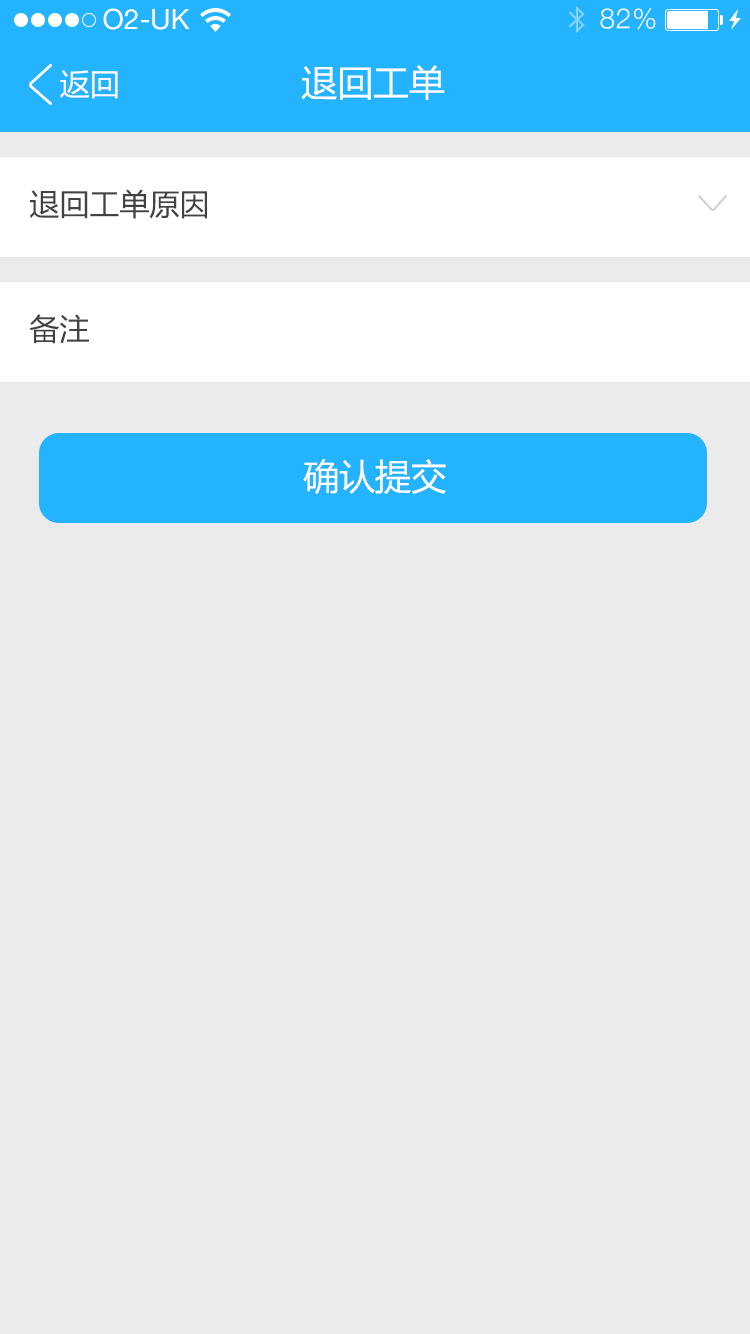
<style>
.page{position:relative;width:750px;height:1334px;background:#ebebeb}
.page>*{position:absolute;margin:0}
.t1{font:36px "MicrosoftYaHei";color:#ffffff}
.t2{font:30px "MicrosoftYaHei";color:#ffffff}
.t3{font:30px "MicrosoftYaHei";color:#424242}
</style>
<div class="page">
<p class="t1" style="left:301px;top:65px;width:144px;height:35px">退回工单</p>
<p class="t2" style="left:60px;top:70px;width:58px;height:29px">返回</p>
<p class="t3" style="left:30px;top:189px;width:177px;height:30px">退回工单原因</p>
<p class="t3" style="left:29px;top:314px;width:60px;height:30px">备注</p>
<p class="t1" style="left:303px;top:459px;width:143px;height:35px">确认提交</p>
</div>
